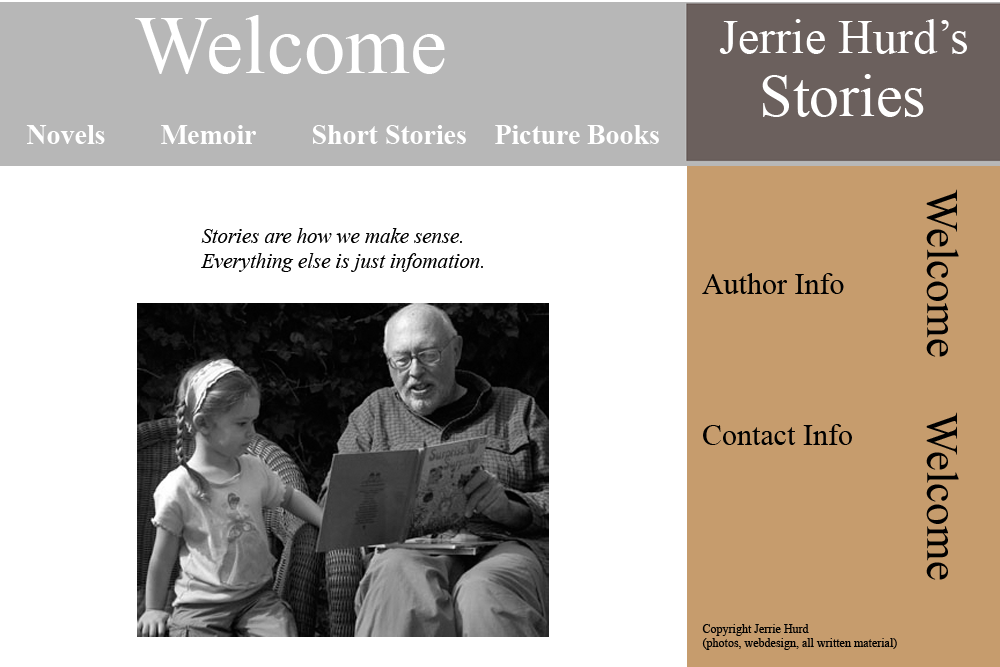
<style>
.page{position:relative;width:1000px;height:667px;background:#ffffff}
.page>*{position:absolute;margin:0}
.t1{font:83.4px "TimesNewRomanPSMT";color:#ffffff}
.t2{font:48px "TimesNewRomanPSMT";color:#ffffff}
.t3{font:60px "TimesNewRomanPSMT";color:#ffffff}
.t4{font:27.8px "TimesNewRomanPS-BoldMT";color:#ffffff}
.t5{font:45px "TimesNewRomanPSMT";color:#000000}
.t6{font:20.8px "TimesNewRomanPS-ItalicMT";color:#000000}
.t7{font:30px "TimesNewRomanPSMT";color:#000000}
.t8{font:12px "TimesNewRomanPSMT";color:#000000}
</style>
<div class="page">
<p class="t1" style="left:135px;top:15px;width:310px;height:59px">Welcome</p>
<p class="t2" style="left:719px;top:19px;width:248px;height:35px">Jerrie Hurd’s</p>
<p class="t3" style="left:762px;top:74px;width:162px;height:43px">Stories</p>
<p class="t4" style="left:26px;top:125px;width:633px;height:19px">Novels        Memoir        Short Stories    Picture Books</p>
<p class="t5" style="left:926px;top:189px;width:33px;height:168px;rotate:90deg">Welcome</p>
<p class="t6" style="left:201px;top:228px;width:282px;height:44px">Stories are how we make sense.<br>Everything else is just infomation.</p>
<p class="t7" style="left:702px;top:273px;width:142px;height:21px">Author Info</p>
<p class="t5" style="left:926px;top:412px;width:33px;height:168px;rotate:90deg">Welcome</p>
<p class="t7" style="left:703px;top:424px;width:149px;height:21px">Contact Info</p>
<p class="t8" style="left:702px;top:624px;width:195px;height:26px">Copyright Jerrie Hurd<br>(photos, webdesign, all written material)</p>
</div>
